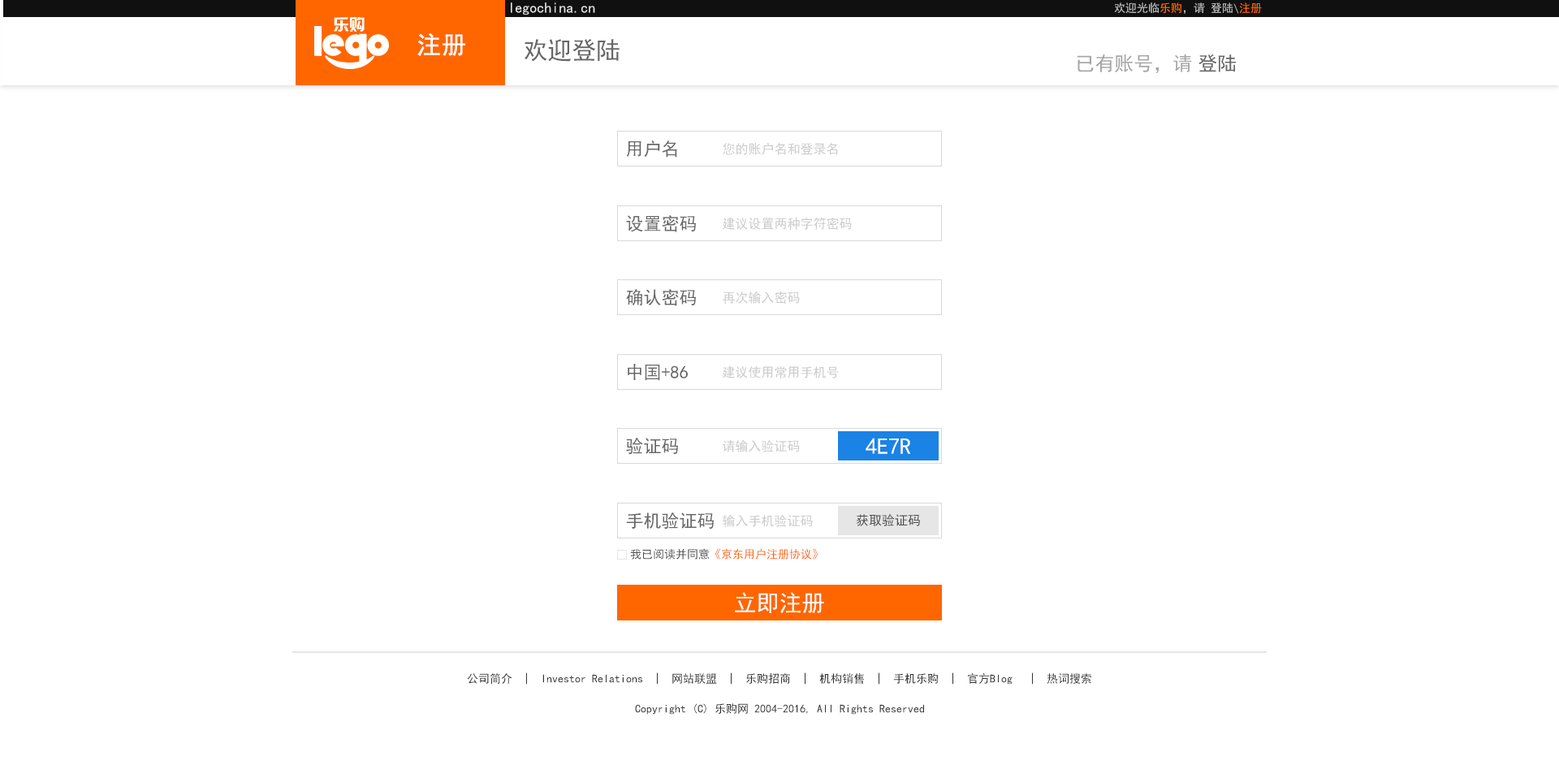
<style>
.page{position:relative;width:1559px;height:765px;background:#ffffff}
.page>*{position:absolute;margin:0}
.t1{font:14.6px "SimHei";color:#e6e6e6}
.t2{font:11.4px "SimHei";color:#bfbfbf}
.t3{font:11.4px "SimHei";color:#ff6600}
.t4{font:24.4px "SimHei";color:#ffffff;font-weight:bold}
.t5{font:24.4px "SimHei";color:#666666}
.t6{font:19.5px "SimHei";color:#666666}
.t7{font:19.5px "SimHei";color:#a6a6a6}
.t8{font:17.9px "SimHei";color:#666666}
.t9{font:13px "SimHei";color:#cccccc}
.t10{font:22.7px "SimHei";color:#ffffff}
.t11{font:13px "SimHei";color:#4d4d4d}
.t12{font:11.4px "SimHei";color:#4d4d4d}
.t13{font:11.4px "SimHei";color:#333333}
</style>
<div class="page">
<p class="t1" style="left:511px;top:2px;width:84px;height:13px">legochina.cn</p>
<p class="t2" style="left:1114px;top:2px;width:148px;height:12px">欢迎光临<span class="t3">乐购</span>，请 登陆\<span class="t3">注册</span></p>
<p class="t4" style="left:417px;top:32px;width:48px;height:24px">注册</p>
<p class="t5" style="left:525px;top:39px;width:95px;height:23px">欢迎登陆</p>
<p class="t6" style="left:1198px;top:54px;width:38px;height:18px">登陆</p>
<p class="t7" style="left:1077px;top:54px;width:115px;height:19px">已有账号，请</p>
<p class="t8" style="left:626px;top:140px;width:51px;height:18px">用户名</p>
<p class="t9" style="left:723px;top:142px;width:115px;height:13px">您的账户名和登录名</p>
<p class="t8" style="left:626px;top:215px;width:70px;height:17px">设置密码</p>
<p class="t9" style="left:723px;top:217px;width:129px;height:13px">建议设置两种字符密码</p>
<p class="t8" style="left:626px;top:288px;width:70px;height:18px">确认密码</p>
<p class="t9" style="left:723px;top:291px;width:77px;height:13px">再次输入密码</p>
<p class="t8" style="left:628px;top:364px;width:60px;height:17px">中国+86</p>
<p class="t9" style="left:723px;top:365px;width:116px;height:13px">建议使用常用手机号</p>
<p class="t8" style="left:626px;top:438px;width:52px;height:17px">验证码</p>
<p class="t10" style="left:866px;top:438px;width:44px;height:16px">4E7R</p>
<p class="t9" style="left:723px;top:439px;width:77px;height:13px">请输入验证码</p>
<p class="t8" style="left:626px;top:512px;width:88px;height:17px">手机验证码</p>
<p class="t9" style="left:723px;top:514px;width:90px;height:13px">输入手机验证码</p>
<p class="t11" style="left:857px;top:514px;width:63px;height:12px">获取验证码</p>
<p class="t3" style="left:630px;top:548px;width:188px;height:11px"><span class="t12">我已阅读并同意</span>《京东用户注册协议》</p>
<p class="t10" style="left:735px;top:592px;width:89px;height:21px">立即注册</p>
<p class="t13" style="left:467px;top:672px;width:624px;height:12px">公司简介  |  Investor Relations  |  网站联盟  |  乐购招商  |  机构销售  |  手机乐购  |  官方Blog   |  热词搜索</p>
<p class="t13" style="left:635px;top:703px;width:289px;height:12px">Copyright (C) 乐购网 2004-2016, All Rights Reserved</p>
</div>
